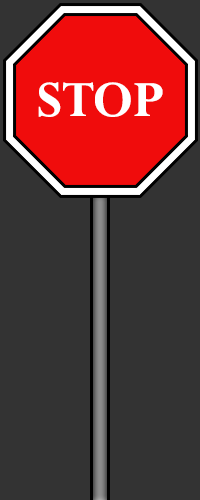
<style>
.page{position:relative;width:200px;height:500px;background:#333333}
.page>*{position:absolute;margin:0}
.t1{font:55.8px "Perpetua-Bold";color:#ffffff}
</style>
<div class="page">
<p class="t1" style="left:38px;top:82px;width:125px;height:35px">STOP</p>
</div>
